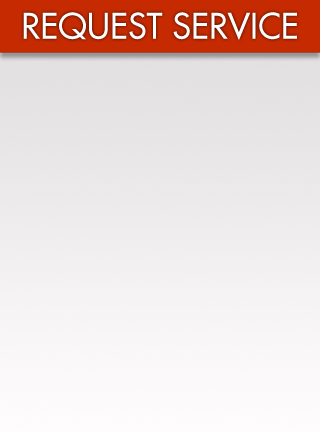
<style>
.page{position:relative;width:320px;height:432px}
.page>*{position:absolute;margin:0}
.t1{font:34.6px "Futura";color:#fffeff}
</style>
<div class="page">
<p class="t1" style="left:23px;top:12px;width:274px;height:29px">REQUEST SERVICE</p>
</div>
